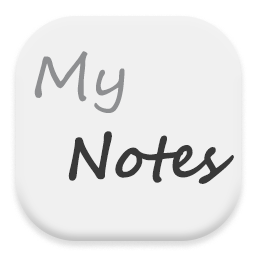
<style>
.page{position:relative;width:256px;height:256px;background:#f0f0f0}
.page>*{position:absolute;margin:0}
.t1{font:60px "SegoeScript";letter-spacing:-0.025em;color:#8e8f91}
.t2{font:60px "SegoeScript-Bold";letter-spacing:-0.025em;color:#393939}
</style>
<div class="page">
<p class="t1" style="left:34px;top:51px;width:91px;height:62px">My</p>
<p class="t2" style="left:68px;top:131px;width:166px;height:53px">Notes</p>
</div>
